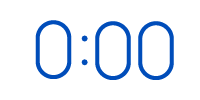
<style>
.page{position:relative;width:200px;height:100px;background:#ffffff}
.page>*{position:absolute;margin:0}
.t1{font:80px "WDBBangna";color:#004dba}
</style>
<div class="page">
<p class="t1" style="left:35px;top:20px;width:37px;height:59px">0</p>
<p class="t1" style="left:95px;top:21px;width:36px;height:59px">0</p>
<p class="t1" style="left:138px;top:21px;width:36px;height:59px">0</p>
<p class="t1" style="left:81px;top:35px;width:7px;height:31px">:</p>
</div>
